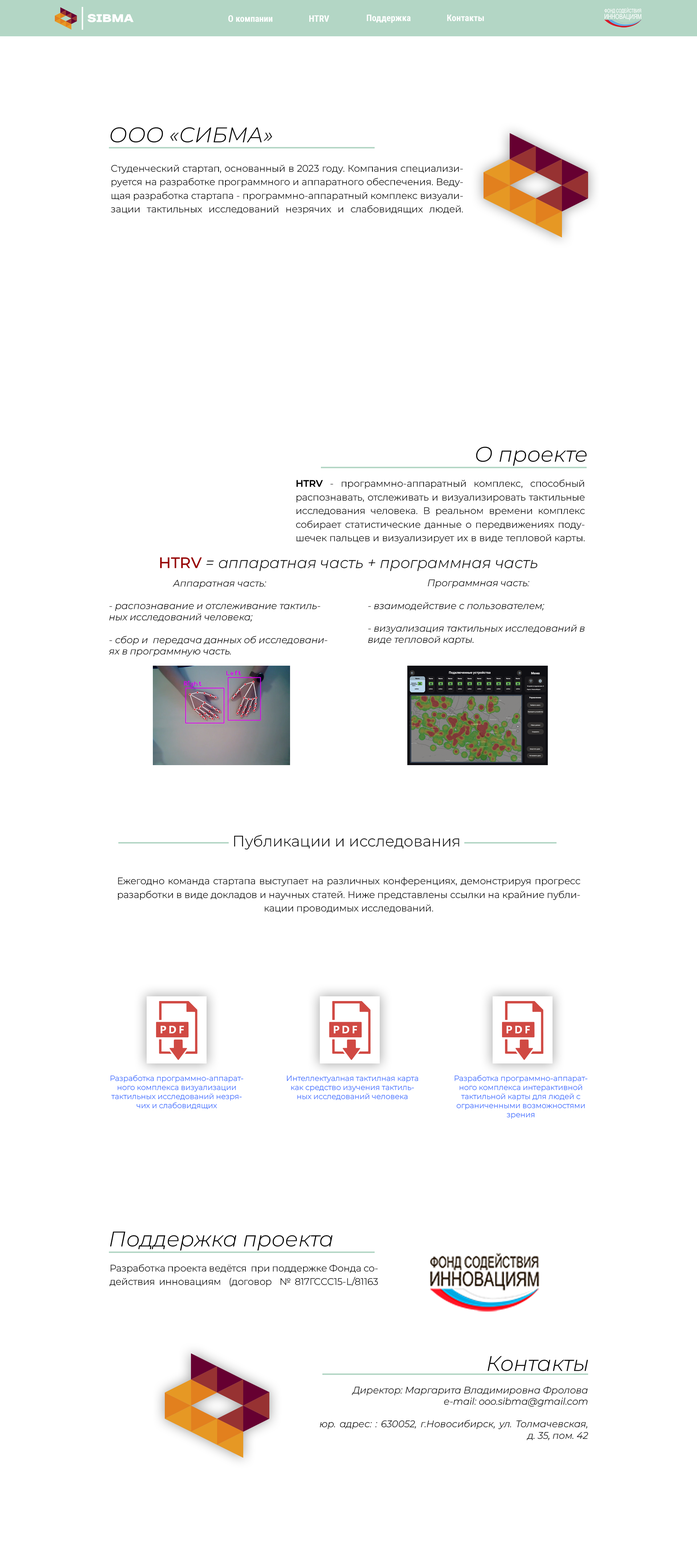
<style>
.page{position:relative;width:697px;height:1568px;background:#ffffff}
.page>*{position:absolute;margin:0}
.t1{font:9.1px "RobotoCondensed-Bold";color:#ffffff}
.t2{font:21.2px "MontserratItalic-LightItalic";color:#000000}
.t3{font:9.4px/13.6px "MontserratRoman-Light";color:#000000}
.t4{font:9.4px/13.6px "MontserratRoman-SemiBold";color:#000000}
.t5{font:15.1px "MontserratItalic-LightItalic";color:#000000}
.t6{font:15.1px "MontserratRoman-Medium";color:#990000}
.t7{font:9.4px "MontserratItalic-LightItalic";color:#000000}
.t8{font:15.1px "MontserratRoman-Light";color:#000000}
.t9{font:7.6px/9.1px "MontserratRoman-Light";color:#3366ff}
</style>
<div class="page">
<p class="t1" style="left:228px;top:15px;width:45px;height:7px">О компании</p>
<p class="t1" style="left:309px;top:15px;width:20px;height:7px">HTRV</p>
<p class="t1" style="left:367px;top:15px;width:44px;height:8px">Поддержка</p>
<p class="t1" style="left:447px;top:15px;width:37px;height:6px">Контакты</p>
<p class="t2" style="left:110px;top:127px;width:162px;height:16px">ООО «СИБМА»</p>
<p class="t3" style="left:111px;top:165px;width:352px;height:50px;text-align:justify">Студенческий стартап, основанный в 2023 году. Компания специализируется на разработке программного и аппаратного обеспечения. Ведущая разработка стартапа - программно-аппаратный комплекс визуализации тактильных исследований незрячих и слабовидящих людей.</p>
<p class="t2" style="left:476px;top:446px;width:111px;height:20px">О проекте</p>
<p class="t3" style="left:296px;top:479px;width:289px;height:64px;text-align:justify"><span class="t4">HTRV</span> - программно-аппаратный комплекс, способный распознавать, отслеживать и визуализировать тактильные исследования человека. В реальном времени комплекс собирает статистические данные о передвижениях подушечек пальцев и визуализирует их в виде тепловой карты.</p>
<p class="t5" style="left:160px;top:557px;width:377px;height:14px"><span class="t6">HTRV </span>= аппаратная часть + программная часть</p>
<p class="t7" style="left:109px;top:580px;width:218px;height:77px;text-align:center">Аппаратная часть:<br><br>- распознавание и отслеживание тактильных исследований человека;<br><br>- сбор и  передача данных об исследованиях в программную часть.</p>
<p class="t7" style="left:368px;top:579px;width:217px;height:66px;text-align:center">Программная часть:<br><br>- взаимодействие с пользователем;<br><br>- визуализация тактильных исследований в виде тепловой карты.</p>
<p class="t8" style="left:234px;top:835px;width:225px;height:15px">Публикации и исследования</p>
<p class="t3" style="left:118px;top:877px;width:462px;height:37px;text-align:justify">Ежегодно команда стартапа выступает на различных конференциях, демонстрируя прогресс разарботки в виде докладов и научных статей. Ниже представлены ссылки на крайние публикации проводимых исследований.</p>
<p class="t9" style="left:110px;top:1075px;width:133px;height:34px;text-align:center">Разработка программно-аппаратного комплекса визуализации тактильных исследований незрячих и слабовидящих</p>
<p class="t9" style="left:287px;top:1075px;width:131px;height:25px;text-align:center">Интеллектуалная тактилная карта как средство изучения тактильных исследований человека</p>
<p class="t9" style="left:454px;top:1075px;width:133px;height:44px;text-align:center">Разработка программно-аппаратного комплекса интерактивной тактильной карты для людей с ограниченными возможностями зрения</p>
<p class="t2" style="left:110px;top:1232px;width:222px;height:19px">Поддержка проекта</p>
<p class="t3" style="left:110px;top:1264px;width:268px;height:23px;text-align:justify">Разработка проекта ведётся  при поддержке Фонда содействия инновациям  (договор  № 817ГССС15-L/81163</p>
<p class="t2" style="left:487px;top:1356px;width:101px;height:15px">Контакты</p>
<p class="t7" style="left:320px;top:1387px;width:268px;height:53px;text-align:justify">Директор: Маргарита Владимировна Фролова<br>e-mail: ooo.sibma@gmail.com<br><br>юр. адрес: : 630052, г.Новосибирск, ул. Толмачевская, <br>д. 35, пом. 42</p>
</div>
